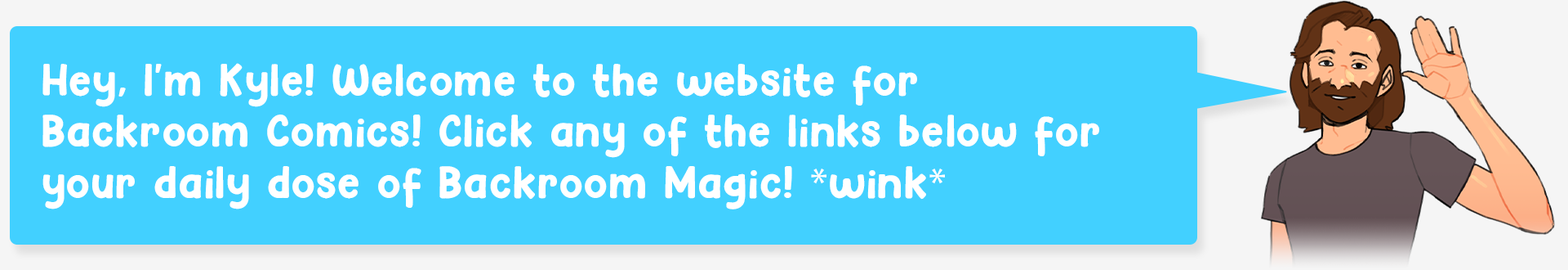
<style>
.page{position:relative;width:1568px;height:270px;background:#42d0ff}
.page>*{position:absolute;margin:0}
.t1{font:42.5px "Hey-Comic";letter-spacing:0.025em;color:#ffffff}
.t2{font:42.5px "MyriadPro-Regular";letter-spacing:0.025em;color:#ffffff}
</style>
<div class="page">
<p class="t1" style="left:42px;top:63px;width:1057px;height:146px">Hey, I'm Kyle! Welcome to the website for <br>Backroom Comics! Click any of the links below for your daily dose of Backroom Magic! <span class="t2">*</span>wink<span class="t2">*</span></p>
</div>
